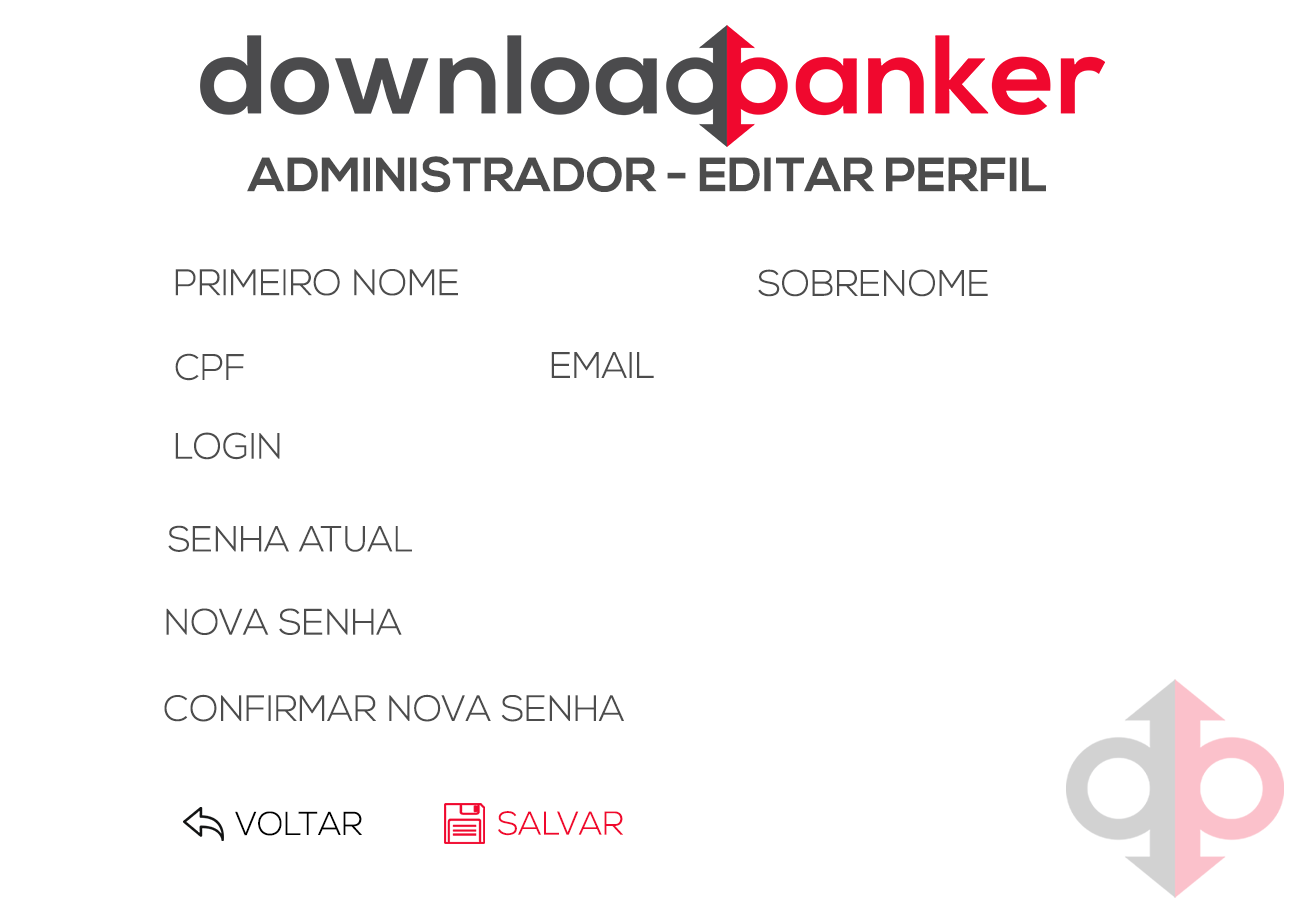
<style>
.page{position:relative;width:1305px;height:905px;background:#ffffff}
.page>*{position:absolute;margin:0}
.t1{font:48px "NexaBold";color:#4c4c4c}
.t2{font:36.6px "NexaLight";color:#4c4c4c}
.t3{font:36.7px "NexaLight";color:#4c4c4c}
.t4{font:36px "NexaLight";color:#4c4c4c}
.t5{font:36.5px "NexaLight";color:#4c4c4c}
.t6{font:33px "NexaLight";color:#000000}
.t7{font:33px "NexaLight";color:#f0082e}
</style>
<div class="page">
<p class="t1" style="left:247px;top:156px;width:799px;height:37px">ADMINISTRADOR - EDITAR PERFIL</p>
<p class="t2" style="left:175px;top:269px;width:283px;height:27px">PRIMEIRO NOME</p>
<p class="t3" style="left:758px;top:269px;width:230px;height:28px">SOBRENOME</p>
<p class="t2" style="left:175px;top:353px;width:69px;height:28px">CPF</p>
<p class="t2" style="left:551px;top:352px;width:103px;height:26px">EMAIL</p>
<p class="t2" style="left:175px;top:432px;width:105px;height:28px">LOGIN</p>
<p class="t4" style="left:168px;top:525px;width:244px;height:27px">SENHA ATUAL</p>
<p class="t5" style="left:166px;top:608px;width:236px;height:27px">NOVA SENHA</p>
<p class="t5" style="left:164px;top:694px;width:460px;height:28px">CONFIRMAR NOVA SENHA</p>
<p class="t6" style="left:235px;top:811px;width:127px;height:25px">VOLTAR</p>
<p class="t7" style="left:498px;top:811px;width:125px;height:25px">SALVAR</p>
</div>
